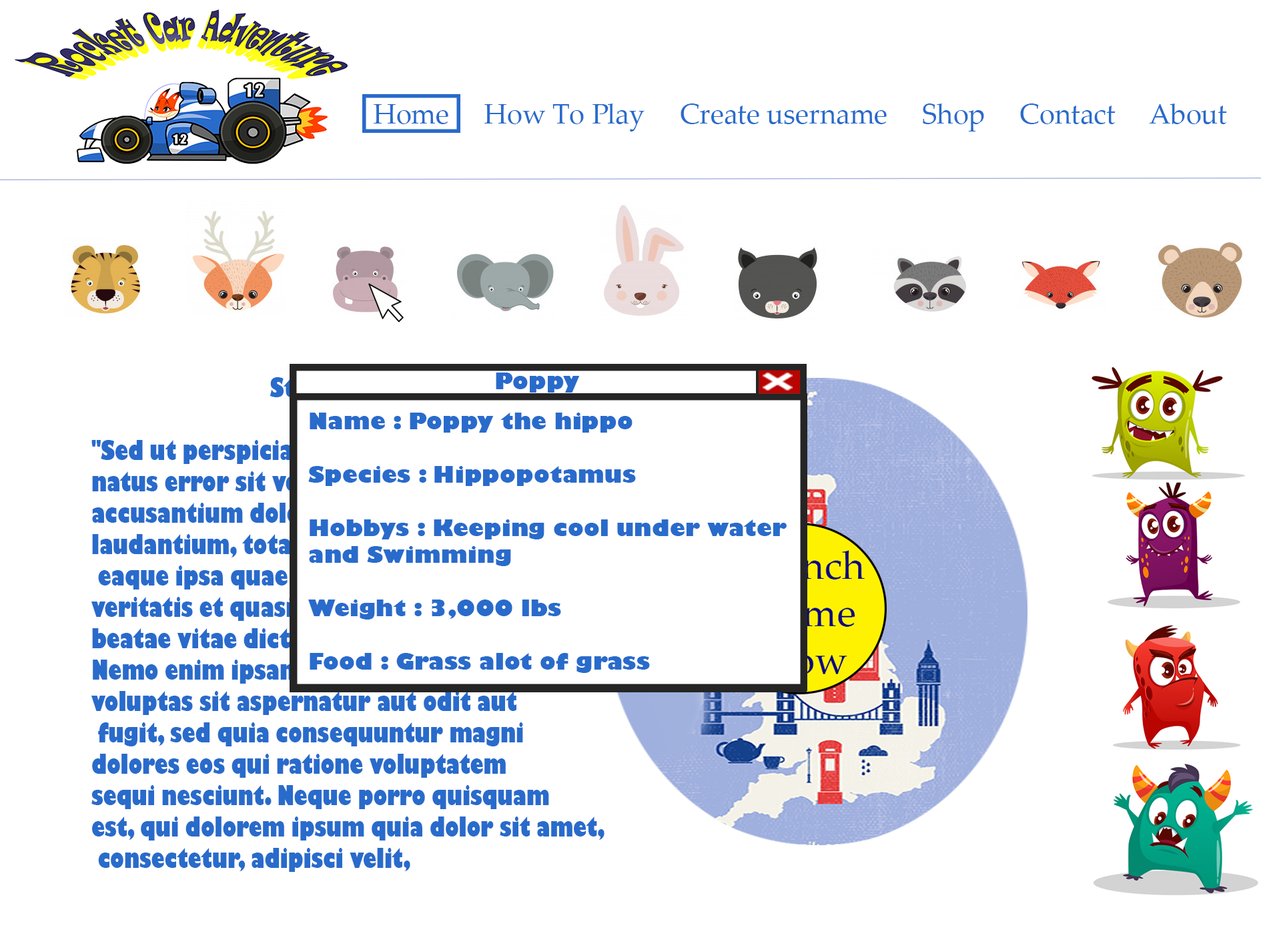
<style>
.page{position:relative;width:1261px;height:946px;background:#ffffff}
.page>*{position:absolute;margin:0}
.t1{font:27.8px "PalatinoLinotype-Roman";color:#296bcb}
.t2{font:26.1px "GillSans-UltraBold";color:#296bcb;scale:0.73 1}
</style>
<div class="page">
<p class="t1" style="left:374px;top:103px;width:853px;height:28px">Home     How To Play     Create username     Shop     Contact     About</p>
<p class="t2" style="left:91px;top:377px;width:514px;height:494px">Story<br><br>"Sed ut perspiciatis unde omnis iste <br>natus error sit voluptatem <br>accusantium doloremque <br>laudantium, totam rem aperiamH<br> eaque ipsa quae ab illo inventore <br>veritatis et quasi architecto <br>beatae vitae dicta sunt explicabo. <br>Nemo enim ipsam voluptatem quia <br>voluptas sit aspernatur aut odit aut<br> fugit, sed quia consequuntur magni <br>dolores eos qui ratione voluptatem <br>sequi nesciunt. Neque porro quisquam <br>est, qui dolorem ipsum quia dolor sit amet,<br> consectetur, adipisci velit,</p>
</div>
